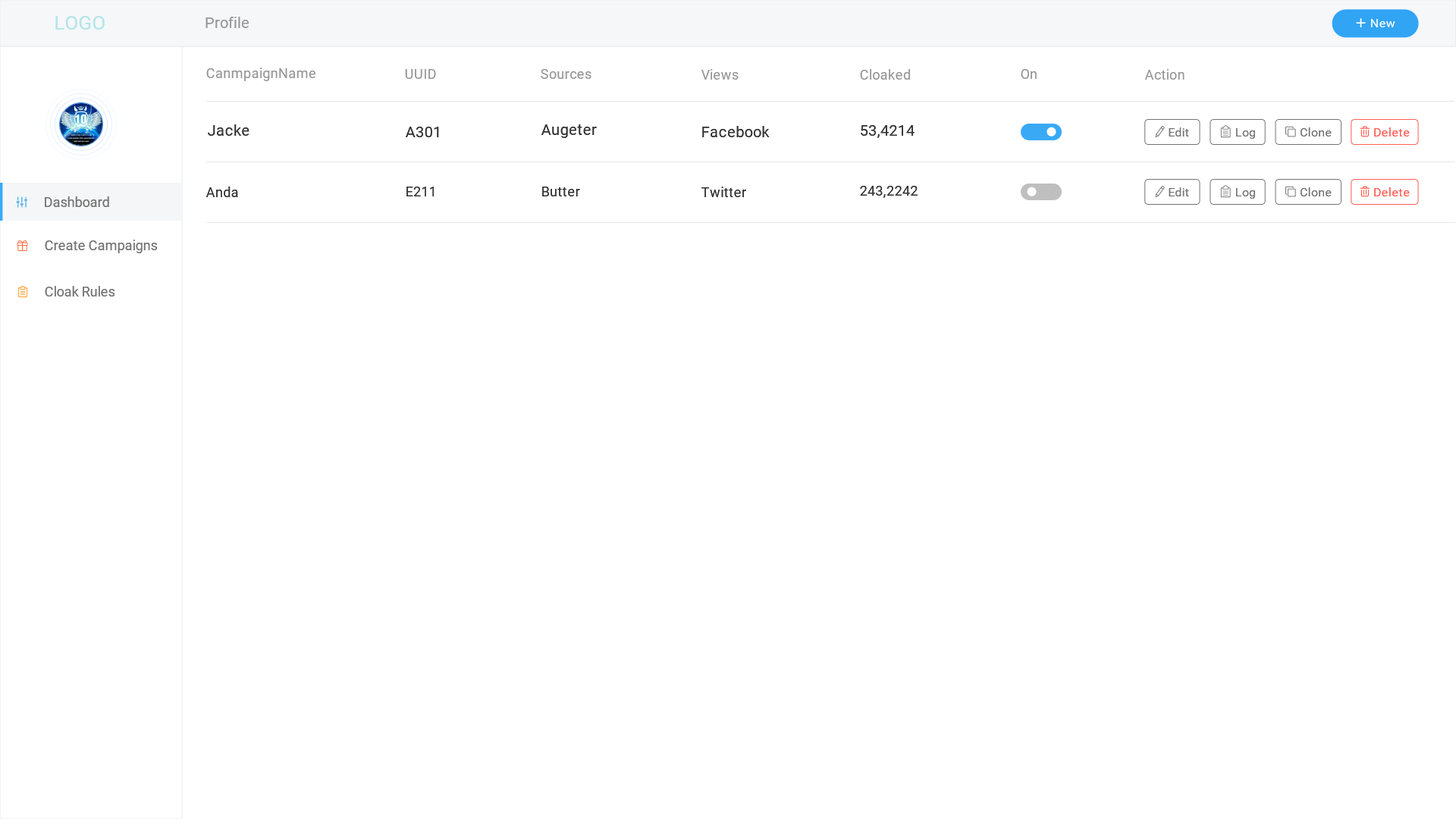
<style>
.page{position:relative;width:1456px;height:819px;background:#ffffff}
.page>*{position:absolute;margin:0}
.t1{font:19.7px "Roboto-Regular";color:#b5e5e7}
.t2{font:15.2px "Roboto-Regular";color:#999999}
.t3{font:12.4px "Roboto-Regular";color:#ffffff}
.t4{font:13.6px "Roboto-Regular";letter-spacing:0.02em;color:#999999}
.t5{font:15.2px "Roboto-Regular";letter-spacing:0.02em;color:#333333}
.t6{font:12.1px "Roboto-Regular";letter-spacing:0.02em;color:#737373}
.t7{font:12.1px "Roboto-Regular";letter-spacing:0.02em;color:#ff5e56}
.t8{font:13.6px "Roboto-Regular";letter-spacing:0.02em;color:#333333}
.t9{font:13.6px "Roboto-Regular";color:#737373}
</style>
<div class="page">
<p class="t1" style="left:55px;top:16px;width:50px;height:14px">LOGO</p>
<p class="t2" style="left:206px;top:17px;width:43px;height:11px">Profile</p>
<p class="t3" style="left:1371px;top:19px;width:24px;height:8px">New</p>
<p class="t4" style="left:206px;top:67px;width:109px;height:14px">CanmpaignName</p>
<p class="t4" style="left:405px;top:69px;width:31px;height:10px">UUID</p>
<p class="t4" style="left:541px;top:69px;width:50px;height:10px">Sources</p>
<p class="t4" style="left:701px;top:69px;width:38px;height:11px">Views</p>
<p class="t4" style="left:860px;top:69px;width:50px;height:11px">Cloaked</p>
<p class="t4" style="left:1021px;top:69px;width:16px;height:10px">On</p>
<p class="t4" style="left:1144px;top:69px;width:41px;height:11px">Action</p>
<p class="t5" style="left:208px;top:124px;width:41px;height:12px">Jacke</p>
<p class="t5" style="left:541px;top:124px;width:56px;height:14px">Augeter</p>
<p class="t5" style="left:702px;top:126px;width:68px;height:11px">Facebook</p>
<p class="t5" style="left:861px;top:125px;width:54px;height:13px">53,4214</p>
<p class="t5" style="left:406px;top:127px;width:33px;height:10px">A301</p>
<p class="t6" style="left:1169px;top:127px;width:20px;height:9px">Edit</p>
<p class="t6" style="left:1236px;top:128px;width:19px;height:11px">Log</p>
<p class="t6" style="left:1301px;top:127px;width:31px;height:9px">Clone</p>
<p class="t7" style="left:1374px;top:127px;width:36px;height:9px">Delete</p>
<p class="t8" style="left:860px;top:186px;width:58px;height:12px">243,2242</p>
<p class="t9" style="left:45px;top:196px;width:64px;height:11px">Dashboard</p>
<p class="t8" style="left:206px;top:187px;width:32px;height:10px">Anda</p>
<p class="t8" style="left:406px;top:187px;width:28px;height:9px">E211</p>
<p class="t8" style="left:542px;top:187px;width:38px;height:9px">Butter</p>
<p class="t8" style="left:701px;top:187px;width:45px;height:10px">Twitter</p>
<p class="t6" style="left:1169px;top:187px;width:20px;height:9px">Edit</p>
<p class="t6" style="left:1236px;top:188px;width:19px;height:11px">Log</p>
<p class="t6" style="left:1301px;top:187px;width:31px;height:9px">Clone</p>
<p class="t7" style="left:1374px;top:187px;width:36px;height:9px">Delete</p>
<p class="t9" style="left:45px;top:240px;width:112px;height:13px">Create Campaigns</p>
<p class="t9" style="left:45px;top:286px;width:70px;height:11px">Cloak Rules</p>
</div>
